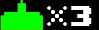
<style>
.page{position:relative;width:99px;height:30px;background:#000000}
.page>*{position:absolute;margin:0}
.t1{font:24px "8BITWONDERNominal";color:#ffffff}
</style>
<div class="page">
<p class="t1" style="left:47px;top:6px;width:45px;height:20px">*3</p>
</div>
